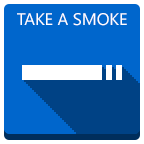
<style>
.page{position:relative;width:144px;height:144px;background:#0066cc}
.page>*{position:absolute;margin:0}
.t1{font:16.7px "LaoUI";color:#ffffff}
</style>
<div class="page">
<p class="t1" style="left:17px;top:13px;width:110px;height:13px">TAKE A SMOKE</p>
</div>
